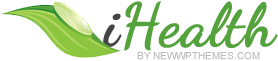
<style>
.page{position:relative;width:278px;height:61px;background:#ffffff}
.page>*{position:absolute;margin:0}
.t1{font:60px "DancingScript-Bold";color:#54a23c;font-weight:bold}
.t2{font:60px "DancingScript-Bold";color:#454445;font-weight:bold}
.t3{font:10px "ArialMT";color:#bbb9bb;text-transform:uppercase}
</style>
<div class="page">
<p class="t1" style="left:103px;top:1px;width:175px;height:50px"><span class="t2">i</span>Health</p>
<p class="t3" style="left:137px;top:52px;width:123px;height:8px">by NewWpThemes.com</p>
</div>
